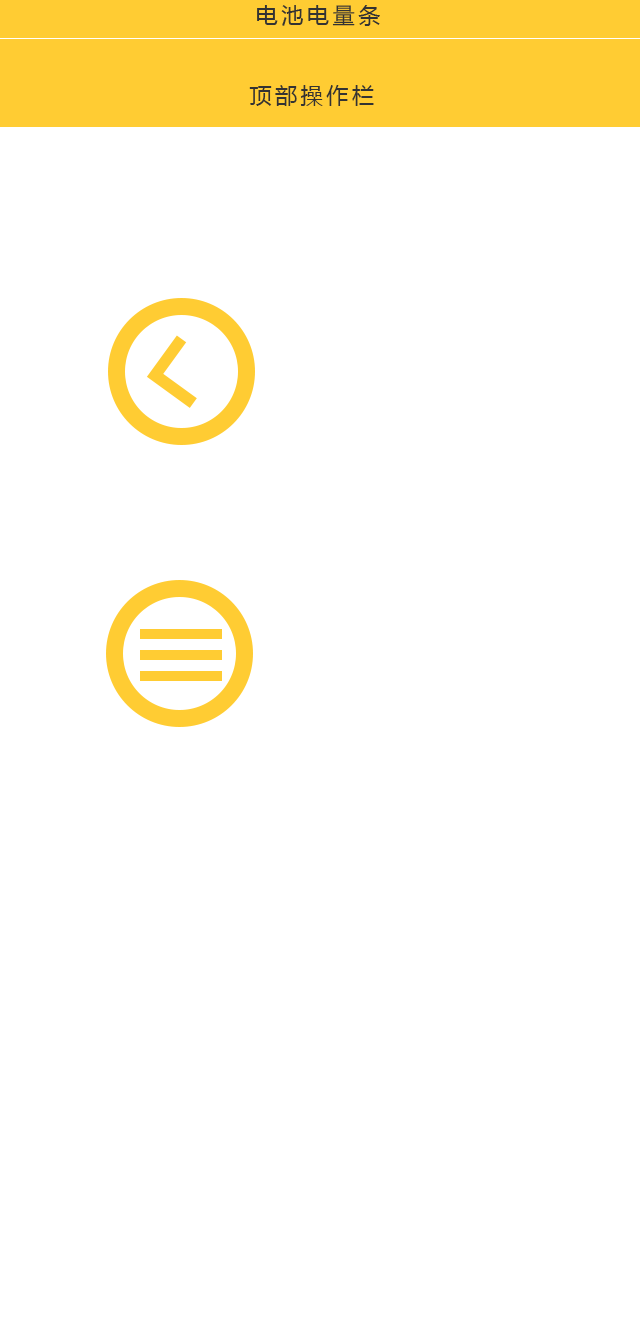
<style>
.page{position:relative;width:640px;height:1336px;background:#ffffff}
.page>*{position:absolute;margin:0}
.t1{font:22.1px "MicrosoftYaHei";letter-spacing:0.16em;color:#333333}
</style>
<div class="page">
<p class="t1" style="left:257px;top:5px;width:123px;height:21px">电池电量条</p>
<p class="t1" style="left:249px;top:85px;width:125px;height:21px">顶部操作栏</p>
</div>
